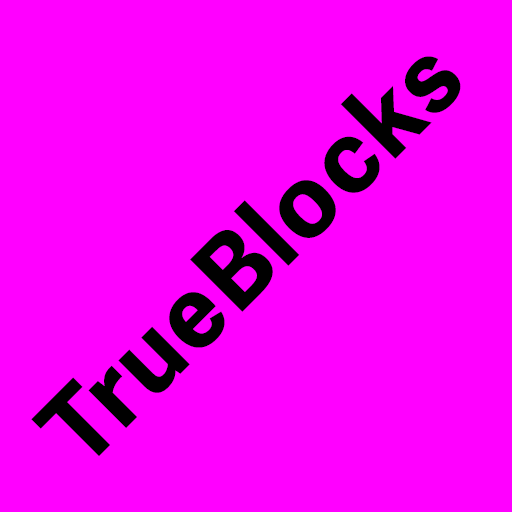
<style>
.page{position:relative;width:512px;height:512px;background:#ff00ff}
.page>*{position:absolute;margin:0}
.t1{font:102px "AdelleSans-Bold";letter-spacing:0.025em;color:#000000}
</style>
<div class="page">
<p class="t1" style="left:31px;top:56px;width:430px;height:400px;rotate:-45deg">TrueBlocks</p>
</div>
